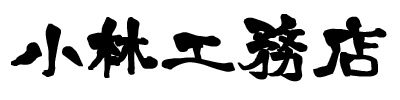
<style>
.page{position:relative;width:400px;height:100px;background:#ffffff}
.page>*{position:absolute;margin:0}
.t1{font:72px "g_brushtappitsu_free_heavy";letter-spacing:0.025em;color:#000000;font-weight:bold}
</style>
<div class="page">
<p class="t1" style="left:11px;top:14px;width:376px;height:68px">小林工務店</p>
</div>
